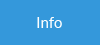
<style>
.page{position:relative;width:100px;height:45px;background:#3498db}
.page>*{position:absolute;margin:0}
.t1{font:15px "Lato-Regular";color:#feffff}
</style>
<div class="page">
<p class="t1" style="left:37px;top:17px;width:25px;height:11px">Info</p>
</div>
